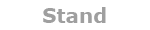
<style>
.page{position:relative;width:150px;height:30px;background:#ffffff}
.page>*{position:absolute;margin:0}
.t1{font:20px "Verdana-Bold";color:#9f9f9f}
</style>
<div class="page">
<p class="t1" style="left:43px;top:7px;width:63px;height:16px">Stand</p>
</div>
